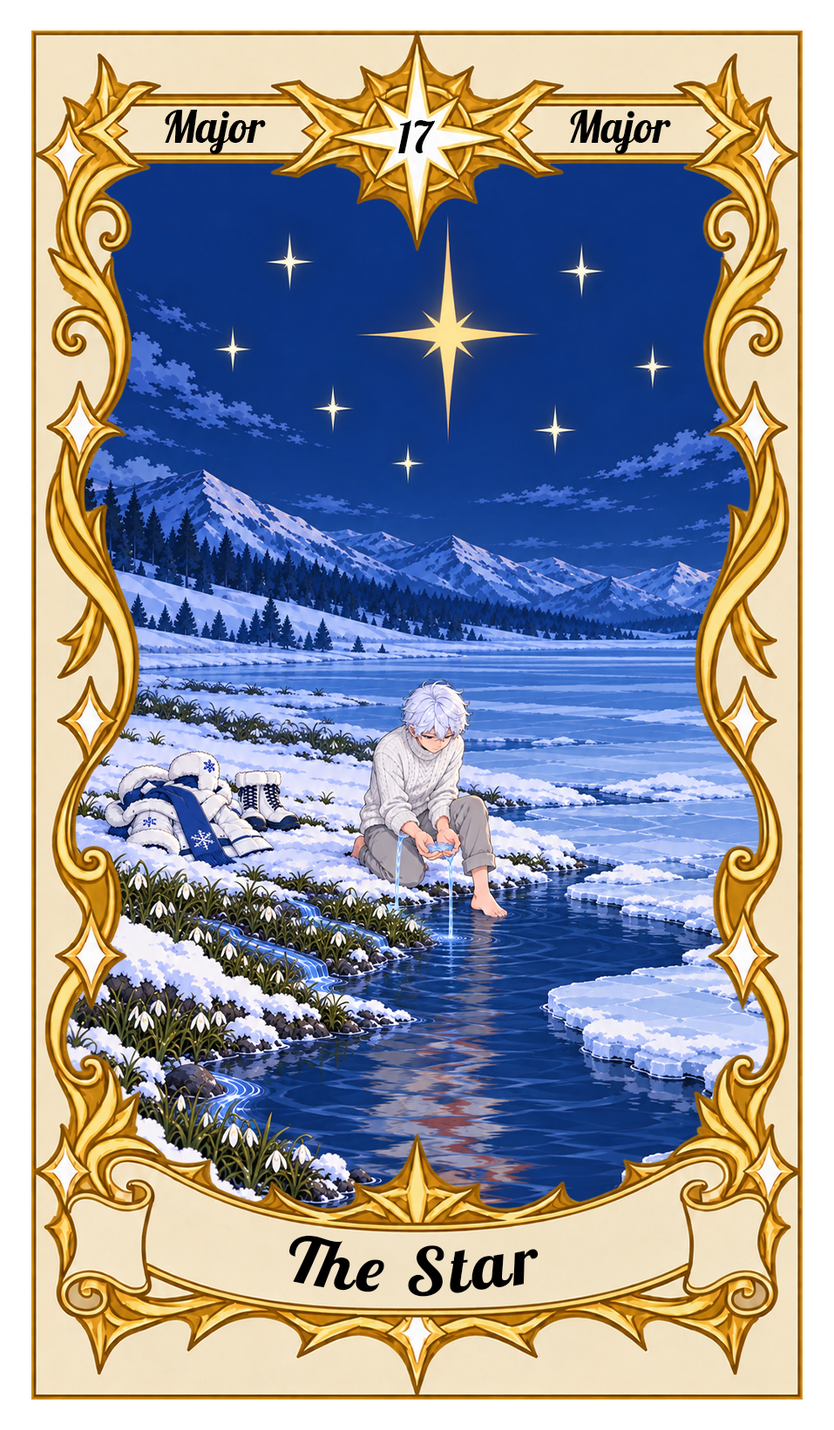
<style>
.page{position:relative;width:834px;height:1430px}
.page>*{position:absolute;margin:0}
.t1{font:43.6px "Lobster-Regular";color:#000000}
.t2{font:65.3px "Lobster-Regular";letter-spacing:0.05em;color:#000000}
</style>
<div class="page">
<p class="t1" style="left:165px;top:110px;width:101px;height:44px">Major</p>
<p class="t1" style="left:570px;top:110px;width:101px;height:44px">Major</p>
<p class="t1" style="left:398px;top:120px;width:37px;height:33px">17</p>
<p class="t2" style="left:289px;top:1235px;width:249px;height:62px">The Star</p>
</div>
